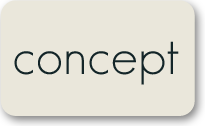
<style>
.page{position:relative;width:205px;height:126px;background:#eae7db}
.page>*{position:absolute;margin:0}
.t1{font:54.3px "GeosansLight";color:#132528}
</style>
<div class="page">
<p class="t1" style="left:14px;top:41px;width:165px;height:44px">concept</p>
</div>
